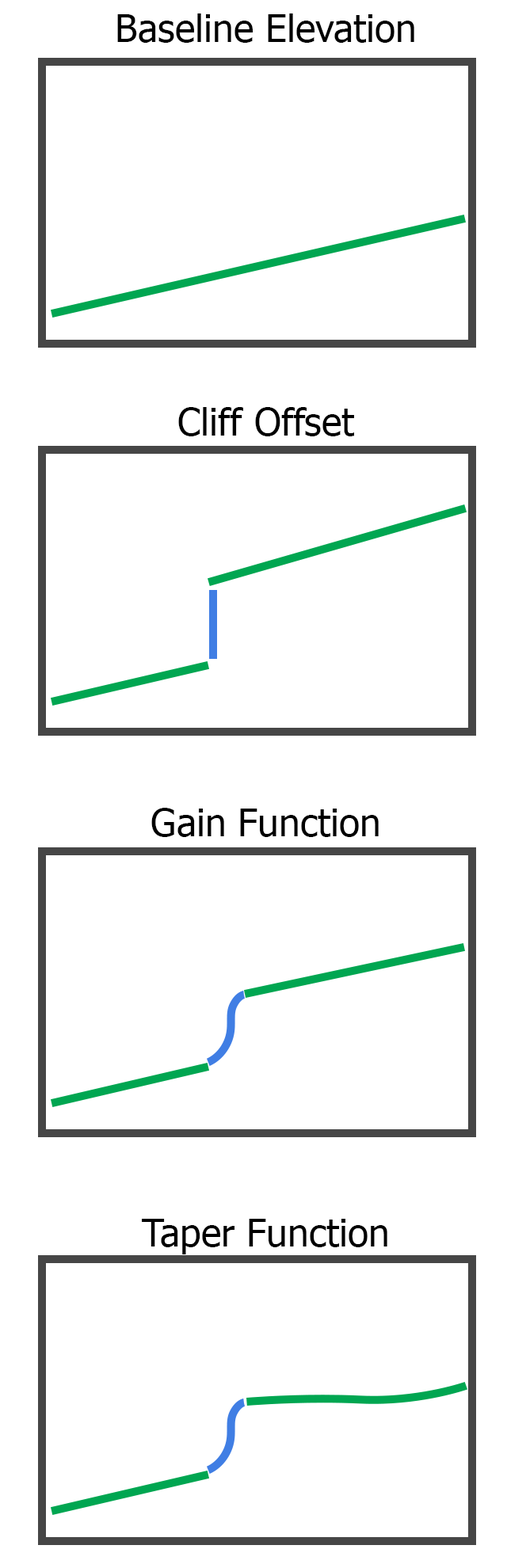
<style>
.page{position:relative;width:507px;height:1568px;background:#ffffff}
.page>*{position:absolute;margin:0}
.t1{font:38px "Tahoma";color:#000000}
</style>
<div class="page">
<p class="t1" style="left:117px;top:13px;width:297px;height:30px">Baseline Elevation</p>
<p class="t1" style="left:178px;top:407px;width:176px;height:29px">Cliff Offset</p>
<p class="t1" style="left:151px;top:808px;width:228px;height:29px">Gain Function</p>
<p class="t1" style="left:142px;top:1219px;width:245px;height:35px">Taper Function</p>
</div>
